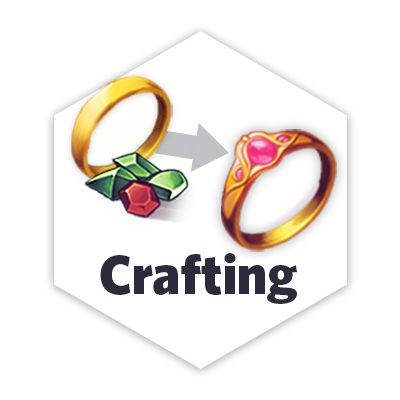
<style>
.page{position:relative;width:400px;height:400px;background:#ffffff}
.page>*{position:absolute;margin:0}
.t1{font:55.7px "WhitneyHTF-Black";color:#2b2b3b}
</style>
<div class="page">
<p class="t1" style="left:100px;top:253px;width:197px;height:51px">Crafting</p>
</div>
